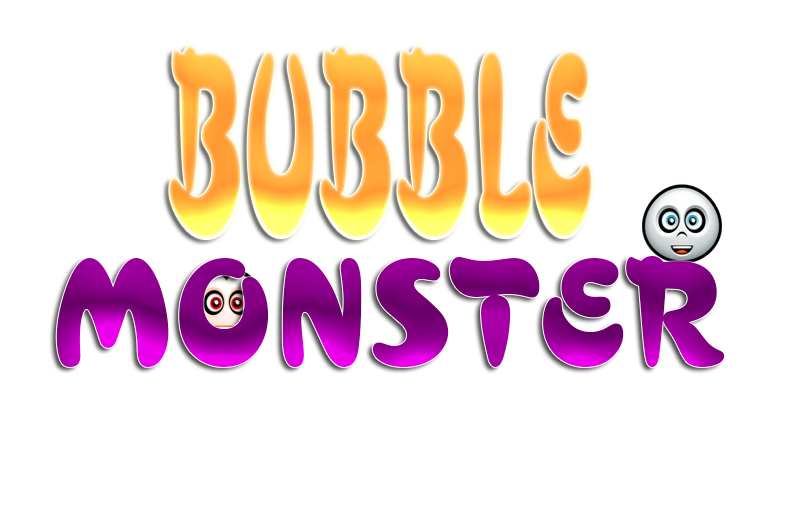
<style>
.page{position:relative;width:800px;height:507px;background:#ffffff}
.page>*{position:absolute;margin:0}
.t1{font:271.9px "UVNBanhMi";scale:0.45 1}
.t2{font:158.1px "UVNBanhMi";scale:1.06 1}
</style>
<div class="page">
<p class="t1" style="left:169px;top:46px;width:423px;height:193px">BUBBLE</p>
<p class="t2" style="left:56px;top:256px;width:669px;height:111px">MONSTER</p>
</div>
